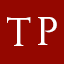
<style>
.page{position:relative;width:64px;height:64px;background:#940700}
.page>*{position:absolute;margin:0}
.t1{font:40px "Constantine";color:#ffffff}
</style>
<div class="page">
<p class="t1" style="left:7px;top:17px;width:24px;height:29px">T</p>
<p class="t1" style="left:38px;top:17px;width:19px;height:28px">P</p>
</div>
